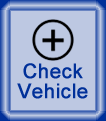
<style>
.page{position:relative;width:106px;height:121px;background:#bdc8e2}
.page>*{position:absolute;margin:0}
.t1{font:20px/20px "ArialMT";color:#003099;font-weight:bold}
</style>
<div class="page">
<p class="t1" style="left:17px;top:63px;width:71px;height:36px;text-align:center">Check<br>Vehicle</p>
</div>
